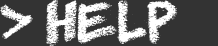
<style>
.page{position:relative;width:218px;height:46px;background:#333333}
.page>*{position:absolute;margin:0}
.t1{font:48px "RightChalk";color:#ffffff}
</style>
<div class="page">
<p class="t1" style="left:0px;top:0px;width:178px;height:47px">&gt; HELP</p>
</div>
